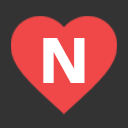
<style>
.page{position:relative;width:128px;height:128px;background:#333333}
.page>*{position:absolute;margin:0}
.t1{font:56px "NanumBarunGothicBold";color:#ffffff;font-weight:bold;scale:1.25 1}
</style>
<div class="page">
<p class="t1" style="left:43px;top:38px;width:42px;height:45px">N</p>
</div>
